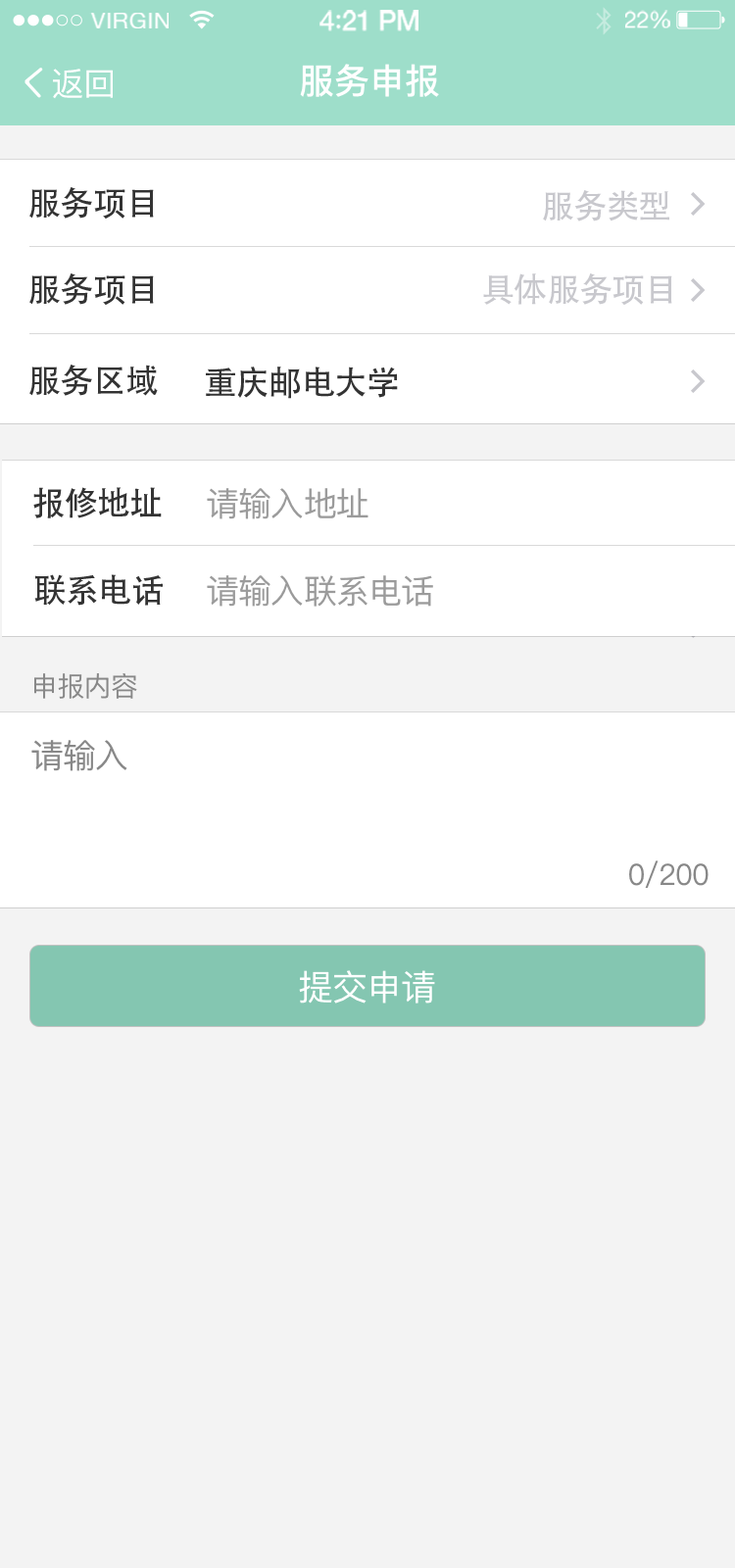
<style>
.page{position:relative;width:735px;height:1568px;background:#f3f3f3}
.page>*{position:absolute;margin:0}
.t1{font:22.9px "HelveticaNeue";letter-spacing:0.02em;color:#ffffff}
.t2{font:27.5px "HelveticaNeue-Medium";letter-spacing:-0.02em;color:#ffffff}
.t3{font:27.5px "Avenir-Medium";letter-spacing:-0.02em;color:#ffffff}
.t4{font:23.1px "HelveticaNeue";letter-spacing:-0.02em;color:#ffffff}
.t5{font:35.3px "PingFangSC-Medium";color:#ffffff}
.t6{font:32.6px "PingFangSC-Medium";color:#ffffff}
.t7{font:33.3px "AdobeHeitiStd-Regular";letter-spacing:-0.026em;color:#333333}
.t8{font:33.3px "AdobeHeitiStd-Regular";letter-spacing:-0.026em;color:#c8c8cd}
.t9{font:33.3px "PingFangSC-Regular";letter-spacing:-0.026em;color:#9b9b9b}
.t10{font:27.4px "PingFangSC-Regular";letter-spacing:-0.026em;color:#888888}
.t11{font:33.3px "PingFangSC-Regular";letter-spacing:-0.026em;color:#888888}
.t12{font:29.4px "PingFangSC-Regular";letter-spacing:-0.026em;color:#888888}
.t13{font:35.3px "PingFangSC-Regular";letter-spacing:-0.026em;color:#ffffff}
</style>
<div class="page">
<p class="t1" style="left:89px;top:13px;width:80px;height:15px">VIRGIN</p>
<p class="t2" style="left:319px;top:10px;width:99px;height:21px">4<span class="t3">:</span>21 PM</p>
<p class="t4" style="left:625px;top:10px;width:45px;height:18px">22%</p>
<p class="t5" style="left:300px;top:64px;width:139px;height:33px">服务申报</p>
<p class="t6" style="left:53px;top:69px;width:60px;height:30px">返回</p>
<p class="t7" style="left:29px;top:187px;width:125px;height:32px">服务项目</p>
<p class="t8" style="left:543px;top:190px;width:126px;height:31px">服务类型</p>
<p class="t7" style="left:29px;top:273px;width:125px;height:32px">服务项目</p>
<p class="t8" style="left:483px;top:273px;width:189px;height:32px">具体服务项目</p>
<p class="t7" style="left:29px;top:365px;width:129px;height:31px">服务区域</p>
<p class="t7" style="left:206px;top:367px;width:192px;height:32px">重庆邮电大学</p>
<p class="t7" style="left:33px;top:487px;width:129px;height:31px">报修地址</p>
<p class="t9" style="left:207px;top:488px;width:161px;height:31px">请输入地址</p>
<p class="t7" style="left:34px;top:574px;width:129px;height:32px">联系电话</p>
<p class="t9" style="left:207px;top:575px;width:226px;height:32px">请输入联系电话</p>
<p class="t10" style="left:34px;top:673px;width:103px;height:26px">申报内容</p>
<p class="t11" style="left:31px;top:740px;width:96px;height:31px">请输入</p>
<p class="t12" style="left:629px;top:860px;width:80px;height:28px">0/200</p>
<p class="t13" style="left:299px;top:970px;width:136px;height:34px">提交申请</p>
</div>
